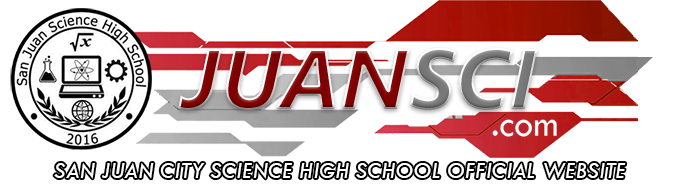
<style>
.page{position:relative;width:680px;height:190px;background:#ffffff}
.page>*{position:absolute;margin:0}
.t1{font:85.8px "SegoeUI-BoldItalic";color:#800000}
.t2{font:85.8px "SegoeUI-BoldItalic";color:#787878}
.t3{font:23.9px "TwCenMT-Italic";color:#ffffff}
</style>
<div class="page">
<p class="t1" style="left:178px;top:48px;width:360px;height:62px">JUAN<span class="t2">SCI</span></p>
<p class="t3" style="left:54px;top:162px;width:572px;height:17px">SAN JUAN CITY SCIENCE HIGH SCHOOL OFFICIAL WEBSITE</p>
</div>
